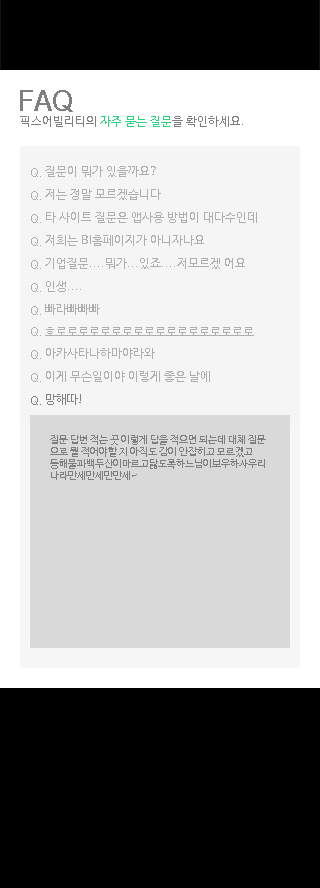
<style>
.page{position:relative;width:320px;height:888px;background:#000000}
.page>*{position:absolute;margin:0}
.t1{font:28px "NanumBarunGothicBold";color:#7f7f7f}
.t2{font:12px "NanumBarunGothic";color:#28d47c}
.t3{font:12px "NanumBarunGothic";color:#7f7f7f}
.t4{font:12px "NanumBarunGothic";color:#aeaeae}
.t5{font:10px "NanumBarunGothic";color:#7f7f7f}
</style>
<div class="page">
<p class="t1" style="left:20px;top:90px;width:53px;height:22px">FAQ</p>
<p class="t2" style="left:20px;top:116px;width:223px;height:11px"><span class="t3">픽스어빌리티의 </span>자주 묻는 질문<span class="t3">을 확인하세요.</span></p>
<p class="t4" style="left:31px;top:168px;width:10px;height:9px">Q.</p>
<p class="t4" style="left:31px;top:168px;width:10px;height:9px">Q.</p>
<p class="t4" style="left:45px;top:166px;width:111px;height:11px">질문이 뭐가 있을까요?</p>
<p class="t4" style="left:45px;top:166px;width:111px;height:11px">질문이 뭐가 있을까요?</p>
<p class="t4" style="left:31px;top:191px;width:10px;height:9px">Q.</p>
<p class="t4" style="left:31px;top:191px;width:10px;height:9px">Q.</p>
<p class="t4" style="left:45px;top:189px;width:116px;height:11px">저는 정말 모르겠습니다</p>
<p class="t4" style="left:45px;top:189px;width:116px;height:11px">저는 정말 모르겠습니다</p>
<p class="t4" style="left:31px;top:214px;width:10px;height:9px">Q.</p>
<p class="t4" style="left:31px;top:214px;width:10px;height:9px">Q.</p>
<p class="t4" style="left:46px;top:212px;width:211px;height:11px">타 사이트 질문은 앱사용 방법이 대다수인데</p>
<p class="t4" style="left:46px;top:212px;width:211px;height:11px">타 사이트 질문은 앱사용 방법이 대다수인데</p>
<p class="t4" style="left:31px;top:237px;width:10px;height:9px">Q.</p>
<p class="t4" style="left:31px;top:237px;width:10px;height:9px">Q.</p>
<p class="t4" style="left:45px;top:235px;width:159px;height:11px">저희는 BI홈페이지가 아니자나요</p>
<p class="t4" style="left:45px;top:235px;width:159px;height:11px">저희는 BI홈페이지가 아니자나요</p>
<p class="t4" style="left:31px;top:260px;width:10px;height:9px">Q.</p>
<p class="t4" style="left:31px;top:260px;width:10px;height:9px">Q.</p>
<p class="t4" style="left:45px;top:258px;width:200px;height:11px">기업질문....뭐가...있죠....저모르겠 어요</p>
<p class="t4" style="left:45px;top:258px;width:200px;height:11px">기업질문....뭐가...있죠....저모르겠 어요</p>
<p class="t4" style="left:46px;top:281px;width:35px;height:11px">인생....</p>
<p class="t4" style="left:46px;top:281px;width:35px;height:11px">인생....</p>
<p class="t4" style="left:31px;top:283px;width:10px;height:9px">Q.</p>
<p class="t4" style="left:31px;top:283px;width:10px;height:9px">Q.</p>
<p class="t4" style="left:45px;top:304px;width:55px;height:11px">빠라빠빠빠</p>
<p class="t4" style="left:45px;top:304px;width:55px;height:11px">빠라빠빠빠</p>
<p class="t4" style="left:31px;top:306px;width:10px;height:9px">Q.</p>
<p class="t4" style="left:31px;top:306px;width:10px;height:9px">Q.</p>
<p class="t4" style="left:31px;top:327px;width:10px;height:9px">Q.</p>
<p class="t4" style="left:31px;top:327px;width:10px;height:9px">Q.</p>
<p class="t4" style="left:45px;top:327px;width:209px;height:9px">호로로로로로로로로로로로로로로로로로로</p>
<p class="t4" style="left:45px;top:327px;width:209px;height:9px">호로로로로로로로로로로로로로로로로로로</p>
<p class="t4" style="left:31px;top:350px;width:10px;height:9px">Q.</p>
<p class="t4" style="left:31px;top:350px;width:10px;height:9px">Q.</p>
<p class="t4" style="left:46px;top:348px;width:109px;height:11px">아카사타나하마야라와</p>
<p class="t4" style="left:46px;top:348px;width:109px;height:11px">아카사타나하마야라와</p>
<p class="t4" style="left:31px;top:373px;width:10px;height:9px">Q.</p>
<p class="t4" style="left:31px;top:373px;width:10px;height:9px">Q.</p>
<p class="t4" style="left:46px;top:371px;width:164px;height:11px">이게 무슨일이야 이렇게 좋은 날에</p>
<p class="t4" style="left:46px;top:371px;width:164px;height:11px">이게 무슨일이야 이렇게 좋은 날에</p>
<p class="t3" style="left:31px;top:396px;width:10px;height:9px">Q.</p>
<p class="t3" style="left:31px;top:396px;width:10px;height:9px">Q.</p>
<p class="t3" style="left:46px;top:394px;width:35px;height:11px">망해따!</p>
<p class="t3" style="left:46px;top:394px;width:35px;height:11px">망해따!</p>
<p class="t5" style="left:50px;top:435px;width:216px;height:45px">질문 답변 적는 곳 이렇게 답을 적으면 되는데 대체 질문<br>으로 뭘 적어야할 지 아직도 감이 안잡히고 모르겠고<br>동해물과백두산이마르고닳도록하느님이보우하사우리<br>나라만세만세만만세~</p>
</div>
